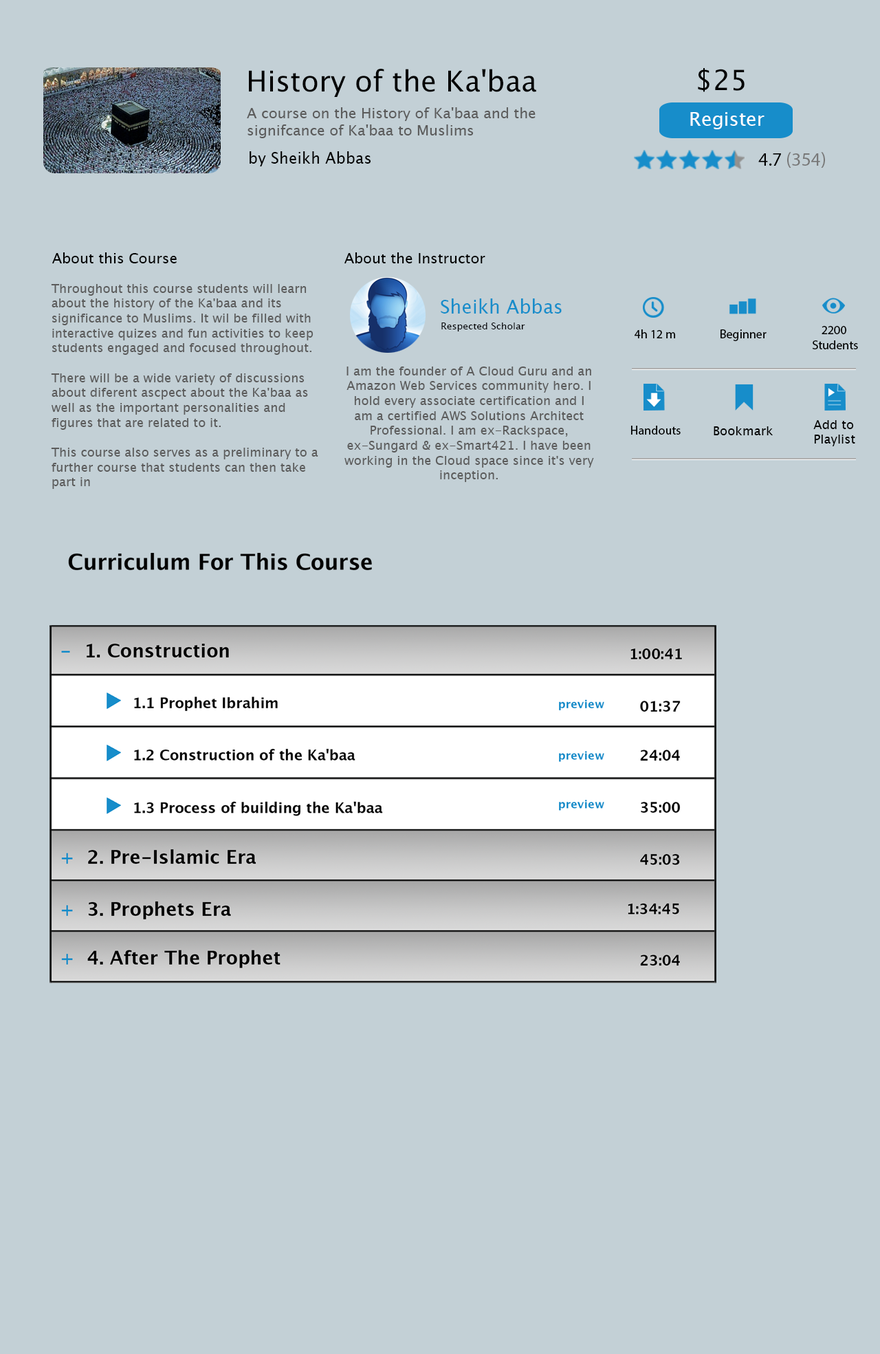
<style>
.page{position:relative;width:880px;height:1354px;background:#c3d0d6}
.page>*{position:absolute;margin:0}
.t1{font:28.8px "LucidaGrande";color:#000000}
.t2{font:28px "LucidaGrande";color:#000000}
.t3{font:14.3px "LucidaGrande";color:#5b5b5b}
.t4{font:19.1px "LucidaGrande";color:#ffffff}
.t5{font:15.5px "LucidaGrande";color:#000000}
.t6{font:19.1px "MyriadPro-Regular";color:#787878}
.t7{font:19.1px "MyriadPro-Regular";color:#000000}
.t8{font:14.3px "LucidaGrande";color:#000000}
.t9{font:12.4px "LucidaGrande";color:#5b5b5b}
.t10{font:18.9px "LucidaGrande";color:#178dca}
.t11{font:9.6px "LucidaGrande";color:#010104}
.t12{font:12.4px "MyriadPro-Regular";color:#000000}
.t13{font:12.4px "LucidaGrande";color:#000000}
</style>
<div class="page">
<p class="t1" style="left:249px;top:69px;width:288px;height:28px">History of the Ka'baa</p>
<p class="t2" style="left:698px;top:68px;width:47px;height:24px">$25</p>
<p class="t3" style="left:247px;top:107px;width:289px;height:31px">A course on the History of Ka'baa and the <br>signifcance of Ka'baa to Muslims</p>
<p class="t4" style="left:691px;top:112px;width:74px;height:17px">Register</p>
<p class="t5" style="left:250px;top:151px;width:121px;height:15px">by Sheikh Abbas</p>
<p class="t6" style="left:759px;top:152px;width:66px;height:16px"><span class="t7">4.7 </span>(354)</p>
<p class="t8" style="left:52px;top:252px;width:125px;height:11px">About this Course</p>
<p class="t8" style="left:345px;top:252px;width:141px;height:11px">About the Instructor</p>
<p class="t9" style="left:51px;top:284px;width:267px;height:205px">Throughout this course students will learn about the history of the Ka'baa and its    significance to Muslims. It wil be filled with interactive quizes and fun activities to keep students engaged and focused throughout.<br><br>There will be a wide variety of discussions about diferent ascpect about the Ka'baa as well as the important personalities and    figures that are related to it. <br><br>This course also serves as a preliminary to a further course that students can then take part in</p>
<p class="t10" style="left:441px;top:299px;width:121px;height:15px">Sheikh Abbas</p>
<p class="t11" style="left:442px;top:323px;width:84px;height:9px">Respected Scholar</p>
<p class="t12" style="left:635px;top:329px;width:40px;height:9px">4h 12 m</p>
<p class="t12" style="left:721px;top:329px;width:46px;height:12px">Beginner</p>
<p class="t12" style="left:813px;top:326px;width:45px;height:23px;text-align:center">2200 <br>Students</p>
<p class="t9" style="left:345px;top:367px;width:249px;height:115px;text-align:center">I am the founder of A Cloud Guru and an Amazon Web Services community hero. I hold every associate certification and I am a certified AWS Solutions Architect Professional. I am ex-Rackspace, ex-Sungard &amp; ex-Smart421. I have been working in the Cloud space since it's very inception.</p>
<p class="t12" style="left:631px;top:426px;width:50px;height:9px">Handouts</p>
<p class="t13" style="left:814px;top:420px;width:42px;height:26px">Add to<br>Playlist</p>
<p class="t13" style="left:714px;top:426px;width:59px;height:9px">Bookmark</p>
</div>
